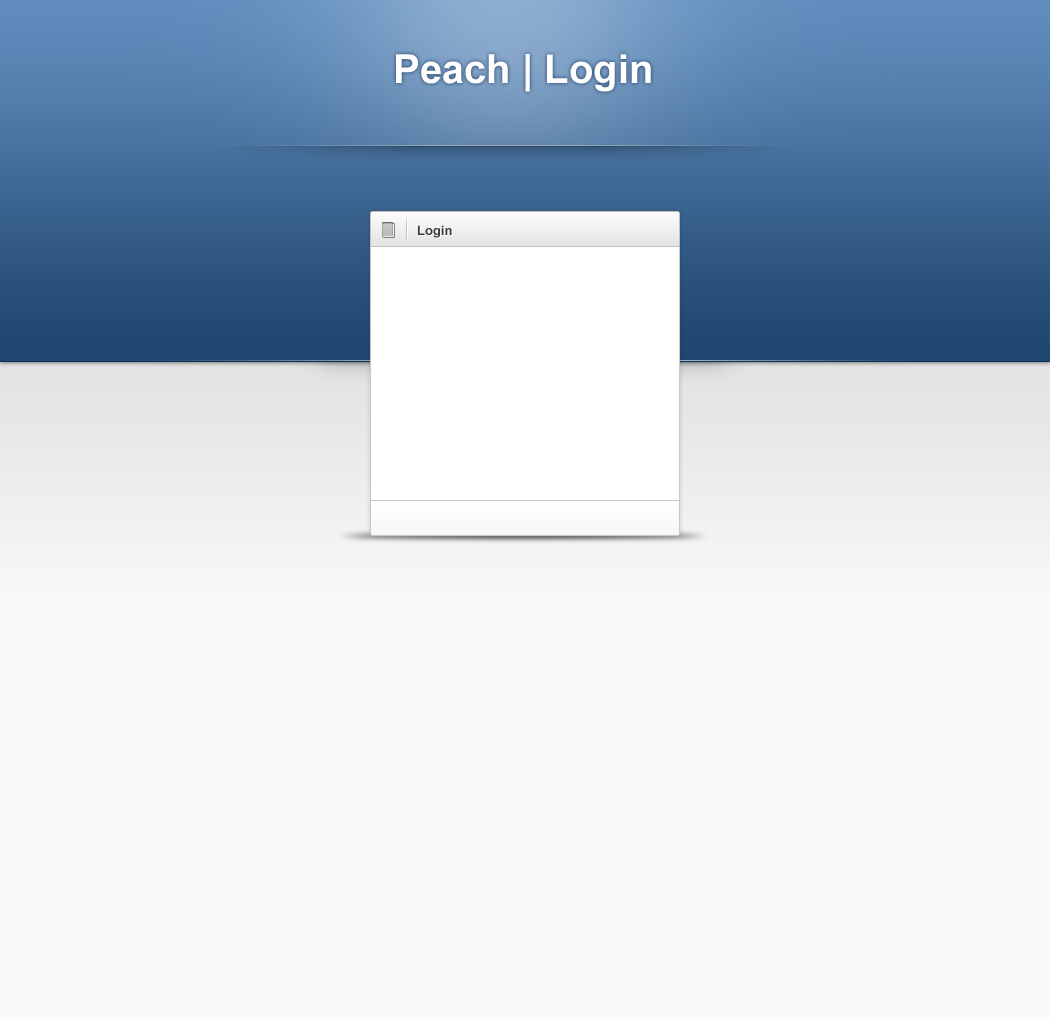
<style>
.page{position:relative;width:1050px;height:1020px;background:#fafafa}
.page>*{position:absolute;margin:0}
.t1{font:40px "Arial-BoldMT";color:#ffffff}
.t2{font:13px "Arial-BoldMT";color:#383838}
</style>
<div class="page">
<p class="t1" style="left:396px;top:54px;width:255px;height:38px">Peach | Login</p>
<p class="t2" style="left:418px;top:225px;width:34px;height:13px">Login</p>
</div>
